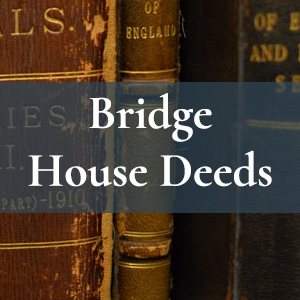
<style>
.page{position:relative;width:300px;height:300px}
.page>*{position:absolute;margin:0}
.t1{font:48px "Cormorant-Bold";color:#fffefe}
</style>
<div class="page">
<p class="t1" style="left:28px;top:93px;width:244px;height:94px;text-align:center">Bridge<br>House Deeds</p>
</div>
